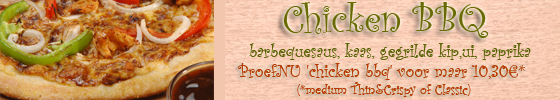
<style>
.page{position:relative;width:560px;height:100px}
.page>*{position:absolute;margin:0}
.t1{font:40px "CurlzMT";color:#686b04}
.t2{font:18px "CurlzMT";color:#596406}
.t3{font:18px "CurlzMT";color:#b83b04}
.t4{font:14px "CurlzMT";color:#b83b04}
</style>
<div class="page">
<p class="t1" style="left:283px;top:2px;width:206px;height:36px">Chicken BBQ</p>
<p class="t2" style="left:249px;top:43px;width:282px;height:17px">barbequesaus, kaas, gegrilde kip,ui, paprika</p>
<p class="t3" style="left:238px;top:63px;width:287px;height:34px;text-align:center">ProefNU 'chicken bbq' voor maar 10,30€*<span class="t4">  <br>(*medium Thin&amp;Crispy of Classic)</span></p>
</div>
